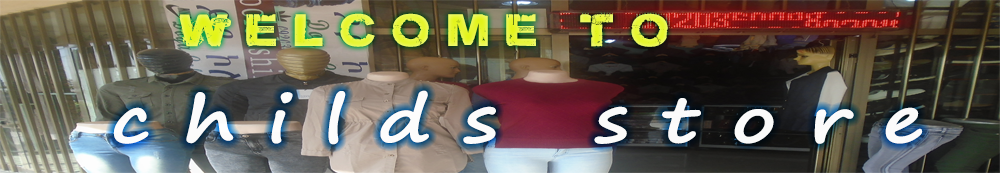
<style>
.page{position:relative;width:1000px;height:173px}
.page>*{position:absolute;margin:0}
.t1{font:38.5px "DamnedDeluxe-Normal";letter-spacing:0.35em;scale:1.1 1}
.t2{font:59.3px "SegoePrint";letter-spacing:0.39em;color:#ffffff;font-weight:bold;scale:1.33 1}
.t3{font:59.3px "Mrs.Monster3D";letter-spacing:0.39em;color:#ffffff;font-weight:bold;scale:1.33 1}
</style>
<div class="page">
<p class="t1" style="left:179px;top:13px;width:489px;height:34px">welcome to</p>
<p class="t2" style="left:113px;top:90px;width:810px;height:55px;opacity:0.97"><span class="t3">  </span>childs store</p>
</div>
